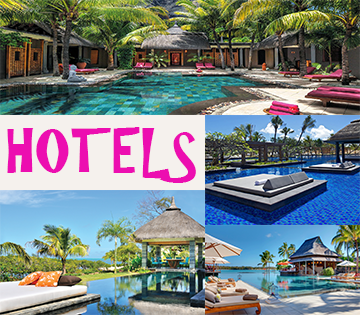
<style>
.page{position:relative;width:360px;height:315px}
.page>*{position:absolute;margin:0}
.t1{font:56px "ARCHRISTY";color:#ec0eb0}
</style>
<div class="page">
<p class="t1" style="left:7px;top:127px;width:189px;height:56px">HOTELS</p>
</div>
